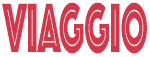
<style>
.page{position:relative;width:150px;height:57px;background:#d2374a}
.page>*{position:absolute;margin:0}
.t1{font:72px "Phosphate-Inline";letter-spacing:0.01em;color:#d2374a;scale:0.5 1}
</style>
<div class="page">
<p class="t1" style="left:2px;top:2px;width:145px;height:52px">VIAGGIO</p>
</div>
